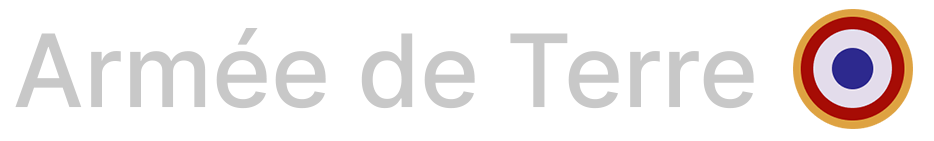
<style>
.page{position:relative;width:934px;height:141px;background:#ffffff}
.page>*{position:absolute;margin:0}
.t1{font:100.9px "Inter-Medium";color:#c8c8c8}
</style>
<div class="page">
<p class="t1" style="left:15px;top:28px;width:739px;height:81px">Armée de Terre</p>
</div>
